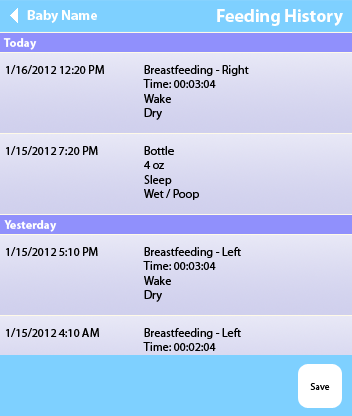
<style>
.page{position:relative;width:352px;height:416px}
.page>*{position:absolute;margin:0}
.t1{font:14px "MyriadPro-Bold";color:#ffffff}
.t2{font:18px "MyriadPro-Bold";color:#ffffff}
.t3{font:12px "MyriadPro-Bold";color:#ffffff}
.t4{font:12px "MyriadPro-Regular";color:#000000}
.t5{font:10px "MyriadPro-Regular";color:#000000}
</style>
<div class="page">
<p class="t1" style="left:27px;top:10px;width:70px;height:13px">Baby Name</p>
<p class="t2" style="left:217px;top:9px;width:126px;height:17px">Feeding History</p>
<p class="t3" style="left:3px;top:38px;width:34px;height:12px">Today</p>
<p class="t4" style="left:6px;top:65px;width:98px;height:9px">1/16/2012 12:20 PM</p>
<p class="t4" style="left:143px;top:65px;width:106px;height:55px">Breastfeeding - Right<br>Time: 00:03:04<br>Wake<br>Dry</p>
<p class="t4" style="left:6px;top:146px;width:92px;height:9px">1/15/2012 7:20 PM</p>
<p class="t4" style="left:144px;top:146px;width:55px;height:54px">Bottle <br>4 oz<br>Sleep<br>Wet / Poop</p>
<p class="t3" style="left:4px;top:220px;width:53px;height:12px">Yesterday</p>
<p class="t4" style="left:6px;top:247px;width:92px;height:9px">1/15/2012 5:10 PM</p>
<p class="t4" style="left:143px;top:247px;width:98px;height:55px">Breastfeeding - Left<br>Time: 00:03:04<br>Wake<br>Dry</p>
<p class="t4" style="left:6px;top:328px;width:93px;height:9px">1/15/2012 4:10 AM</p>
<p class="t4" style="left:143px;top:328px;width:98px;height:55px">Breastfeeding - Left<br>Time: 00:02:04<br>Wake<br>Dry</p>
<p class="t5" style="left:310px;top:383px;width:20px;height:7px">Save</p>
</div>
